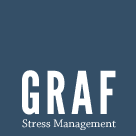
<style>
.page{position:relative;width:136px;height:136px;background:#344f67}
.page>*{position:absolute;margin:0}
.t1{font:58.9px "LeagueGothic";letter-spacing:0.08em;color:#ffffff;text-transform:uppercase}
.t2{font:11.6px "ChaparralPro-Regular";color:#ffffff}
</style>
<div class="page">
<p class="t1" style="left:22px;top:70px;width:94px;height:45px">Graf</p>
<p class="t2" style="left:22px;top:119px;width:94px;height:11px">Stress Management</p>
</div>
